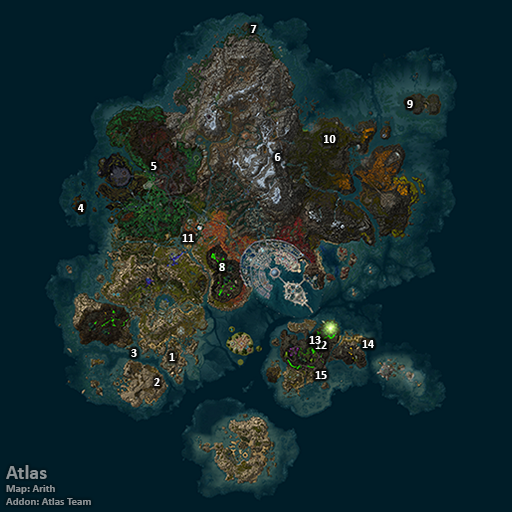
<style>
.page{position:relative;width:512px;height:512px;background:#001d28}
.page>*{position:absolute;margin:0}
.t1{font:12px "Calibri-Bold";color:#ffffff}
.t2{font:11px "Calibri-Bold";color:#8d9396}
.t3{font:20px "Calibri-Bold";color:#8d9396}
</style>
<div class="page">
<p class="t1" style="left:250px;top:25px;width:7px;height:8px">7</p>
<p class="t1" style="left:407px;top:100px;width:6px;height:8px">9</p>
<p class="t1" style="left:324px;top:135px;width:12px;height:8px">10</p>
<p class="t1" style="left:274px;top:153px;width:7px;height:8px">6</p>
<p class="t1" style="left:151px;top:162px;width:6px;height:8px">5</p>
<p class="t1" style="left:77px;top:204px;width:7px;height:8px">4</p>
<p class="t1" style="left:182px;top:234px;width:12px;height:8px">11</p>
<p class="t1" style="left:219px;top:263px;width:6px;height:8px">8</p>
<p class="t1" style="left:309px;top:336px;width:12px;height:8px">13</p>
<p class="t1" style="left:315px;top:341px;width:12px;height:8px">12</p>
<p class="t1" style="left:362px;top:340px;width:12px;height:8px">14</p>
<p class="t1" style="left:131px;top:349px;width:6px;height:8px">3</p>
<p class="t1" style="left:169px;top:353px;width:6px;height:8px">1</p>
<p class="t1" style="left:315px;top:371px;width:12px;height:8px">15</p>
<p class="t1" style="left:154px;top:378px;width:6px;height:8px">2</p>
<p class="t2" style="left:6px;top:465px;width:85px;height:40px"><span class="t3">Atlas<br></span>Map: Arith<br>Addon: Atlas Team</p>
</div>
